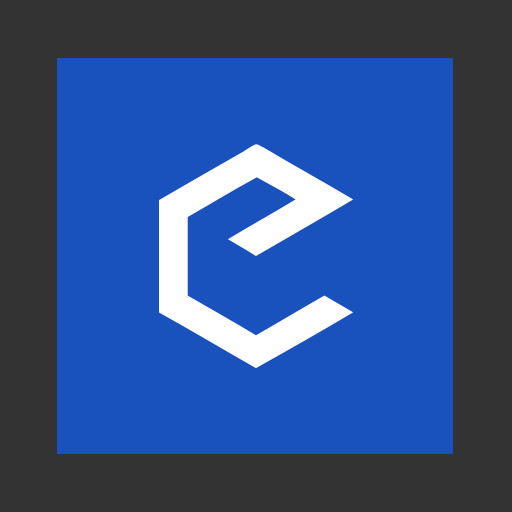
<style>
.page{position:relative;width:512px;height:512px;background:#1952bc}
.page>*{position:absolute;margin:0}
.t1{font:264.7px "Cubic";color:#ffffff}
</style>
<div class="page">
<p class="t1" style="left:159px;top:144px;width:194px;height:224px">E</p>
</div>
